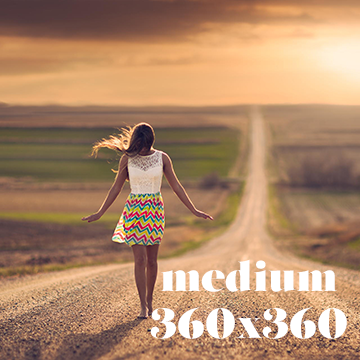
<style>
.page{position:relative;width:360px;height:360px}
.page>*{position:absolute;margin:0}
.t1{font:41.7px "Salome-Fine";color:#ffffff}
</style>
<div class="page">
<p class="t1" style="left:161px;top:259px;width:176px;height:33px">medium</p>
<p class="t1" style="left:150px;top:307px;width:197px;height:32px">360x360</p>
</div>
